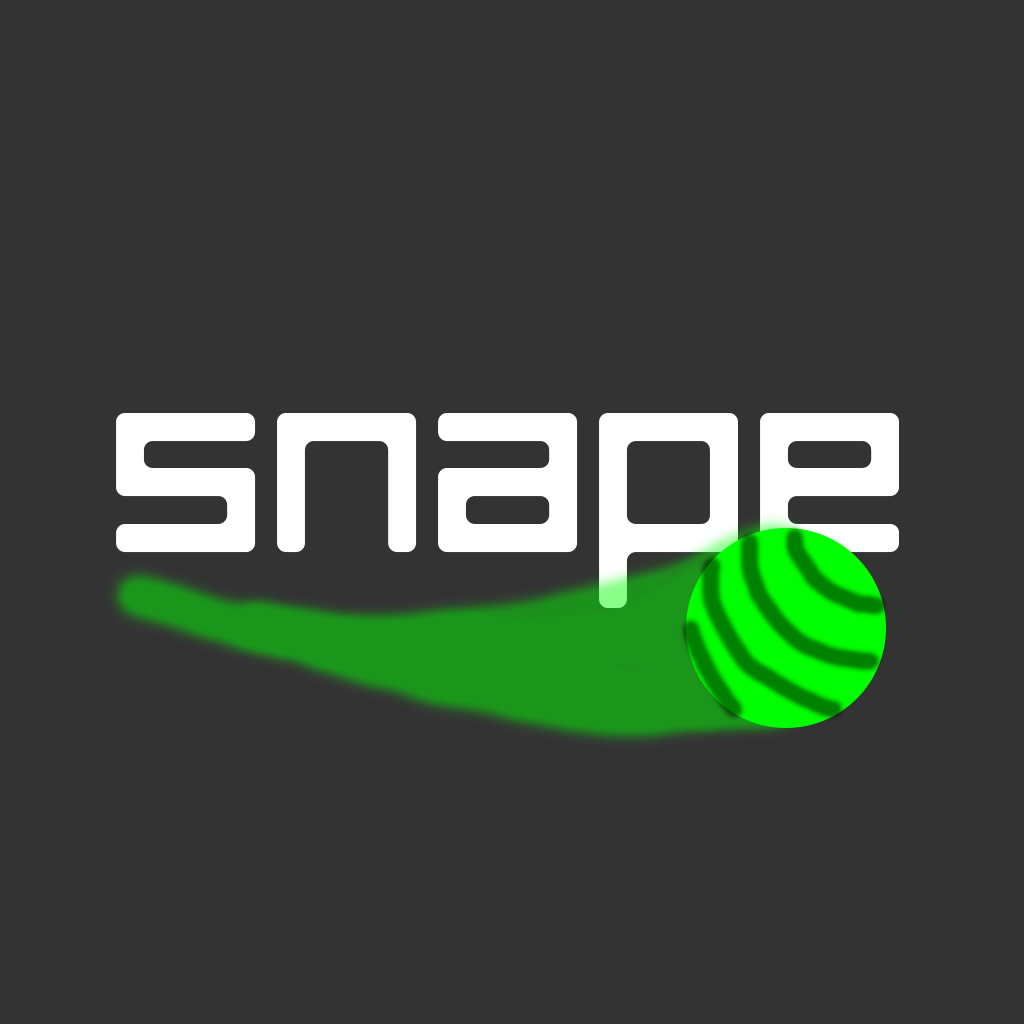
<style>
.page{position:relative;width:1024px;height:1024px;background:#333333}
.page>*{position:absolute;margin:0}
.t1{font:250px "RazerRegular";color:#ffffff}
</style>
<div class="page">
<p class="t1" style="left:116px;top:413px;width:783px;height:195px">SNAPE</p>
</div>
